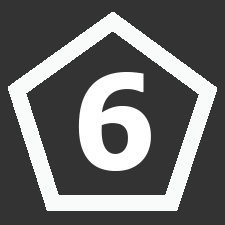
<style>
.page{position:relative;width:225px;height:225px;background:#333333}
.page>*{position:absolute;margin:0}
.t1{font:130px "Verdana-Bold";color:#ffffff;scale:0.93 1}
</style>
<div class="page">
<p class="t1" style="left:78px;top:72px;width:73px;height:99px">6</p>
</div>
